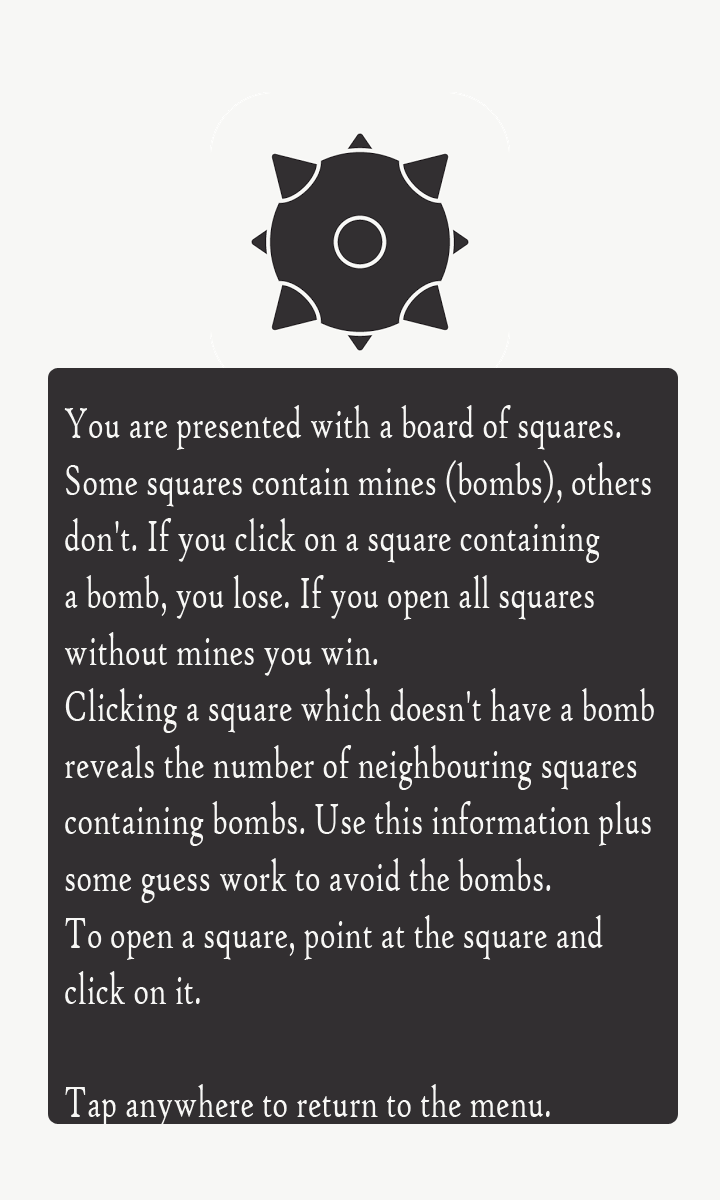
<style>
.page{position:relative;width:720px;height:1200px;background:#322f31}
.page>*{position:absolute;margin:0}
.t1{font:47.2px "HighTowerText-Reg";color:#f7f7f5;scale:0.67 1}
</style>
<div class="page">
<p class="t1" style="left:64px;top:405px;width:590px;height:724px">You are presented with a board of squares. <br>Some squares contain mines (bombs), others <br>don't. If you click on a square containing <br>a bomb, you lose. If you open all squares<br>without mines you win.<br>Clicking a square which doesn't have a bomb <br>reveals the number of neighbouring squares <br>containing bombs. Use this information plus <br>some guess work to avoid the bombs.<br>To open a square, point at the square and <br>click on it. <br><br>Tap anywhere to return to the menu.</p>
</div>
